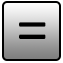
<style>
.page{position:relative;width:63px;height:63px}
.page>*{position:absolute;margin:0}
.t1{font:65px "Calibri";color:#000000}
</style>
<div class="page">
<p class="t1" style="left:19px;top:22px;width:27px;height:17px">=</p>
</div>
